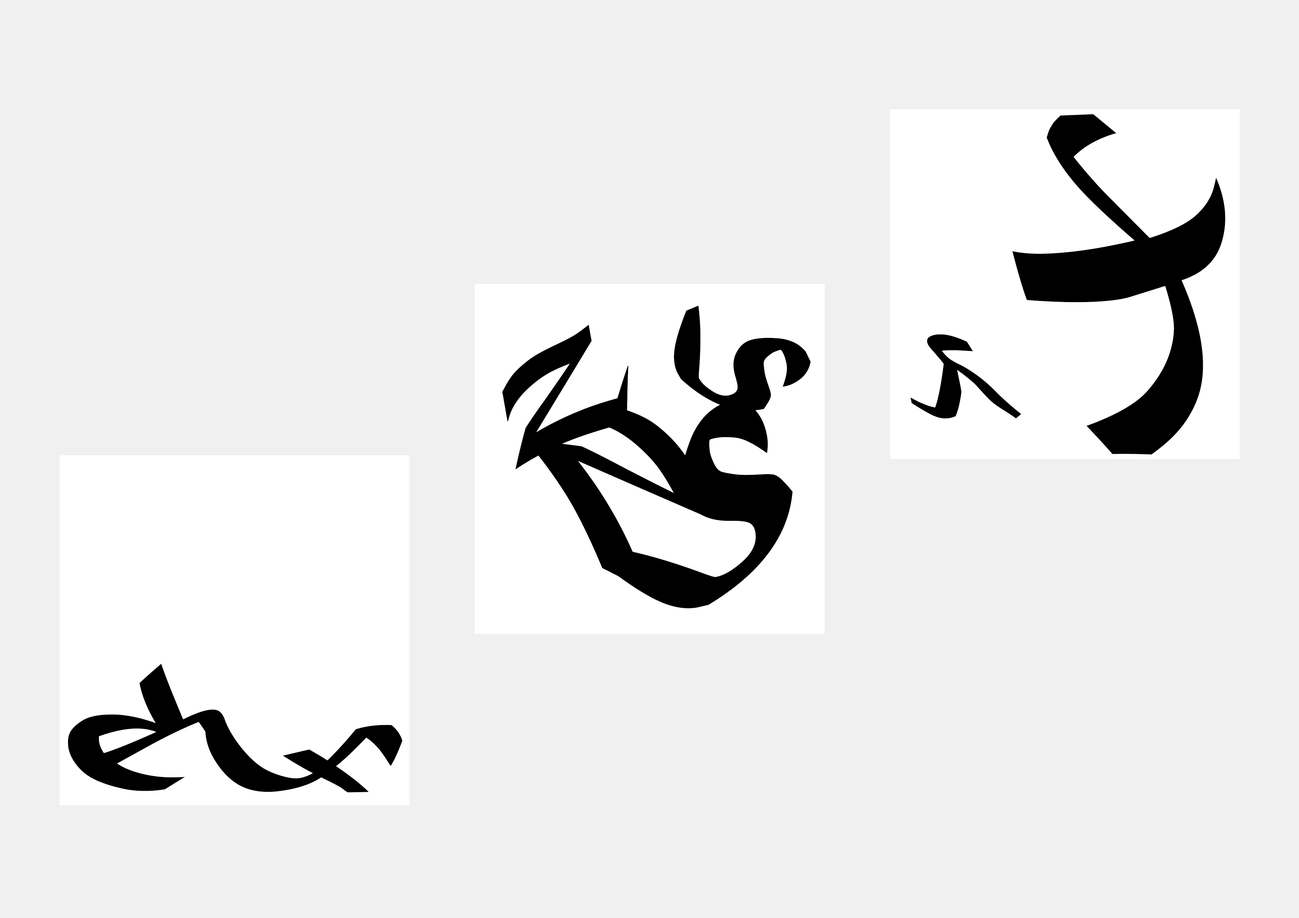
<style>
.page{position:relative;width:1299px;height:918px;background:#f0f0f0}
.page>*{position:absolute;margin:0}
.t1{font:242px "MaturaMTScriptCapitals";color:#000000;scale:0.97 1}
.t2{font:144.9px "MaturaMTScriptCapitals";color:#000000}
.t3{font:117px "MaturaMTScriptCapitals";color:#000000}
.t4{font:91.5px "MaturaMTScriptCapitals";color:#000000}
.t5{font:229.1px "MaturaMTScriptCapitals";color:#000000}
.t6{font:154.8px "MaturaMTScriptCapitals";color:#000000}
.t7{font:145.4px "MaturaMTScriptCapitals";color:#000000}
</style>
<div class="page">
<p class="t1" style="left:1012px;top:114px;width:213px;height:341px;rotate:-73deg">X</p>
<p class="t2" style="left:674px;top:305px;width:136px;height:106px;rotate:64deg">S</p>
<p class="t3" style="left:502px;top:325px;width:126px;height:144px;rotate:139deg">Z</p>
<p class="t4" style="left:910px;top:334px;width:111px;height:85px">Y</p>
<p class="t5" style="left:603px;top:400px;width:190px;height:209px;rotate:-10deg">S</p>
<p class="t6" style="left:525px;top:409px;width:203px;height:168px;rotate:-139deg">Z</p>
<p class="t7" style="left:68px;top:664px;width:160px;height:127px;rotate:-152deg">R</p>
<p class="t7" style="left:205px;top:717px;width:197px;height:76px;rotate:33deg">F</p>
</div>
